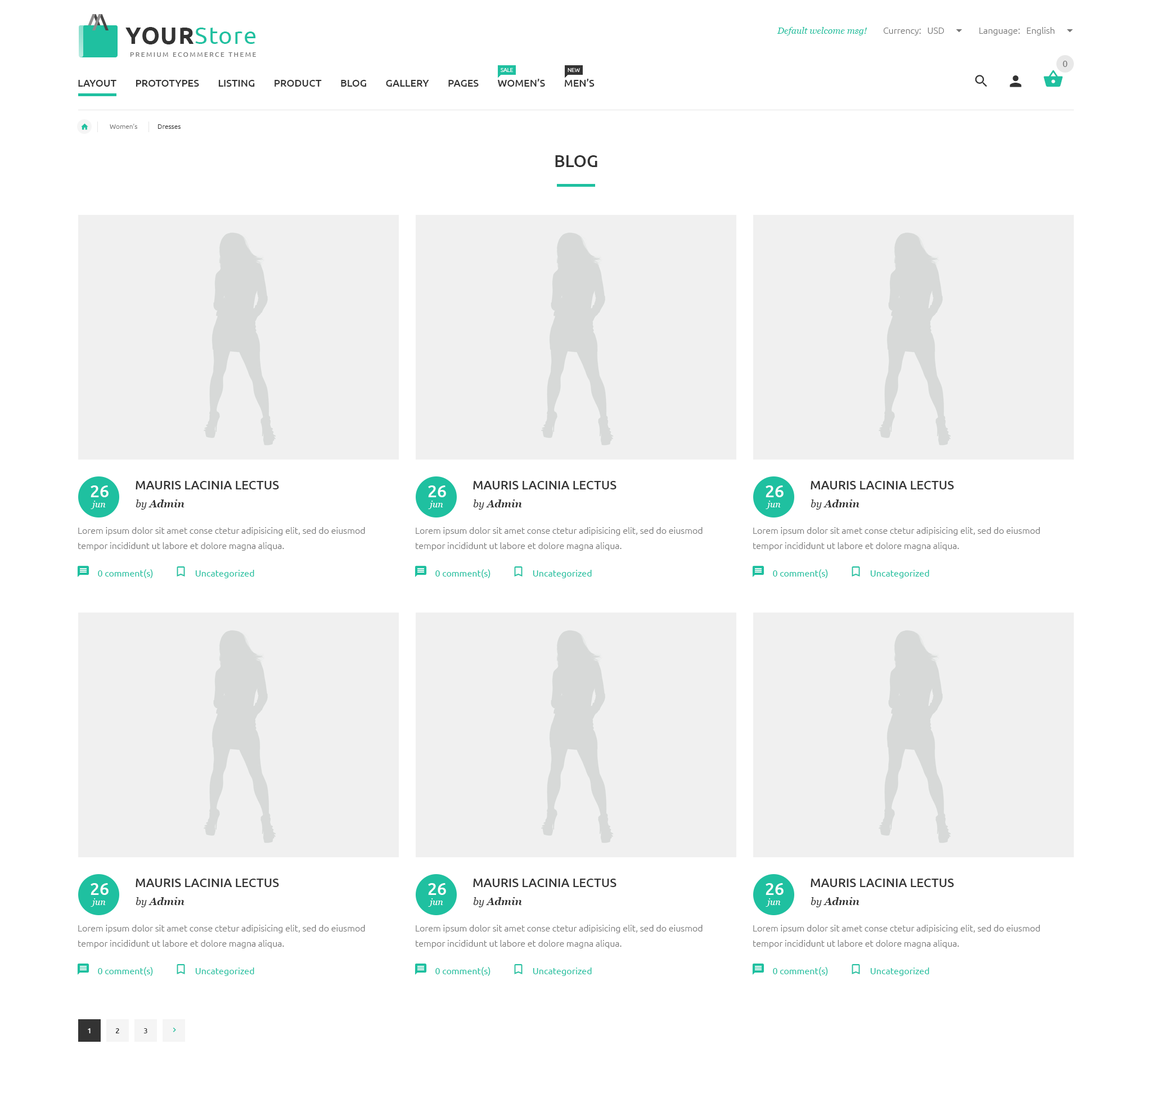
<style>
.page{position:relative;width:1152px;height:1107px;background:#ffffff}
.page>*{position:absolute;margin:0}
.t1{font:23.6px "Ubuntu";letter-spacing:0.04em;color:#1fc0a0}
.t2{font:23.6px "Ubuntu-Bold";letter-spacing:0.04em;color:#333333;text-transform:uppercase}
.t3{font:9px "Georgia-Italic";color:#1fc0a0}
.t4{font:9px "Ubuntu-Light";color:#777777}
.t5{font:6.8px "Ubuntu";letter-spacing:0.2em;color:#777777;text-transform:uppercase}
.t6{font:9px "Ubuntu";color:#777777}
.t7{font:5.6px "Ubuntu-Light";color:#ffffff;text-transform:uppercase}
.t8{font:10.1px "Ubuntu-Medium";color:#333333;text-transform:uppercase}
.t9{font:6.8px "Ubuntu-Light";color:#777777}
.t10{font:6.8px "Ubuntu-Light";color:#333333}
.t11{font:16.9px "Ubuntu-Medium";color:#333333;text-transform:uppercase}
.t12{font:16.9px "Ubuntu-Medium";color:#ffffff;text-transform:uppercase}
.t13{font:12.4px "Ubuntu-Medium";color:#333333;text-transform:uppercase}
.t14{font:9px "Georgia-Italic";color:#ffffff}
.t15{font:10.1px "Georgia-BoldItalic";color:#333333}
.t16{font:10.1px "Georgia-Italic";color:#333333}
.t17{font:9px/15.2px "Ubuntu-Light";color:#777777}
.t18{font:7.3px "Ubuntu-Medium";color:#ffffff;text-transform:uppercase}
.t19{font:7.3px "Ubuntu-Medium";color:#333333;text-transform:uppercase}
</style>
<div class="page">
<p class="t1" style="left:125px;top:27px;width:131px;height:17px"><span class="t2">Your</span>Store</p>
<p class="t3" style="left:777px;top:27px;width:90px;height:8px">Default welcome msg!</p>
<p class="t4" style="left:883px;top:28px;width:61px;height:7px">Currency:   USD</p>
<p class="t4" style="left:979px;top:27px;width:76px;height:8px">Language:   English</p>
<p class="t5" style="left:130px;top:52px;width:126px;height:5px">Premium ecommerce theme</p>
<p class="t6" style="left:1063px;top:61px;width:5px;height:6px">0</p>
<p class="t7" style="left:501px;top:68px;width:12px;height:4px">sale</p>
<p class="t7" style="left:568px;top:68px;width:12px;height:4px">New</p>
<p class="t8" style="left:78px;top:79px;width:517px;height:8px">LAYOUT        Prototypes        LISTING        PRODUCT        BLOG        GALLERY        PAGES        WOMEN’s        MEN’s</p>
<p class="t9" style="left:110px;top:124px;width:27px;height:5px">Women’s</p>
<p class="t10" style="left:158px;top:124px;width:23px;height:5px">Dresses</p>
<p class="t11" style="left:555px;top:155px;width:42px;height:12px">Blog</p>
<p class="t12" style="left:91px;top:485px;width:18px;height:12px">26</p>
<p class="t13" style="left:136px;top:481px;width:143px;height:8px">Mauris lacinia lectus</p>
<p class="t12" style="left:428px;top:485px;width:18px;height:12px">26</p>
<p class="t13" style="left:473px;top:481px;width:143px;height:8px">Mauris lacinia lectus</p>
<p class="t12" style="left:766px;top:485px;width:18px;height:12px">26</p>
<p class="t13" style="left:811px;top:481px;width:143px;height:8px">Mauris lacinia lectus</p>
<p class="t14" style="left:91px;top:501px;width:15px;height:8px">jun</p>
<p class="t15" style="left:136px;top:500px;width:48px;height:10px"><span class="t16">by </span>Admin</p>
<p class="t14" style="left:428px;top:501px;width:15px;height:8px">jun</p>
<p class="t15" style="left:473px;top:500px;width:49px;height:10px"><span class="t16">by </span>Admin</p>
<p class="t14" style="left:766px;top:501px;width:15px;height:8px">jun</p>
<p class="t15" style="left:811px;top:500px;width:49px;height:10px"><span class="t16">by </span>Admin</p>
<p class="t17" style="left:78px;top:527px;width:287px;height:24px">Lorem ipsum dolor sit amet conse ctetur adipisicing elit, sed do eiusmod tempor incididunt ut labore et dolore magna aliqua.</p>
<p class="t17" style="left:416px;top:527px;width:287px;height:24px">Lorem ipsum dolor sit amet conse ctetur adipisicing elit, sed do eiusmod tempor incididunt ut labore et dolore magna aliqua.</p>
<p class="t17" style="left:753px;top:527px;width:287px;height:24px">Lorem ipsum dolor sit amet conse ctetur adipisicing elit, sed do eiusmod tempor incididunt ut labore et dolore magna aliqua.</p>
<p class="t13" style="left:136px;top:879px;width:143px;height:8px">Mauris lacinia lectus</p>
<p class="t13" style="left:473px;top:879px;width:143px;height:8px">Mauris lacinia lectus</p>
<p class="t13" style="left:811px;top:879px;width:143px;height:8px">Mauris lacinia lectus</p>
<p class="t12" style="left:91px;top:883px;width:18px;height:12px">26</p>
<p class="t12" style="left:428px;top:883px;width:18px;height:12px">26</p>
<p class="t12" style="left:766px;top:883px;width:18px;height:12px">26</p>
<p class="t14" style="left:91px;top:898px;width:15px;height:9px">jun</p>
<p class="t15" style="left:136px;top:897px;width:48px;height:10px"><span class="t16">by </span>Admin</p>
<p class="t14" style="left:428px;top:898px;width:15px;height:9px">jun</p>
<p class="t15" style="left:473px;top:897px;width:49px;height:10px"><span class="t16">by </span>Admin</p>
<p class="t14" style="left:766px;top:898px;width:15px;height:9px">jun</p>
<p class="t15" style="left:811px;top:897px;width:49px;height:10px"><span class="t16">by </span>Admin</p>
<p class="t17" style="left:78px;top:925px;width:287px;height:23px">Lorem ipsum dolor sit amet conse ctetur adipisicing elit, sed do eiusmod tempor incididunt ut labore et dolore magna aliqua.</p>
<p class="t17" style="left:416px;top:925px;width:287px;height:23px">Lorem ipsum dolor sit amet conse ctetur adipisicing elit, sed do eiusmod tempor incididunt ut labore et dolore magna aliqua.</p>
<p class="t17" style="left:753px;top:925px;width:287px;height:23px">Lorem ipsum dolor sit amet conse ctetur adipisicing elit, sed do eiusmod tempor incididunt ut labore et dolore magna aliqua.</p>
<p class="t18" style="left:88px;top:1028px;width:3px;height:5px">1</p>
<p class="t19" style="left:115px;top:1028px;width:4px;height:5px">2</p>
<p class="t19" style="left:143px;top:1028px;width:4px;height:5px">3</p>
</div>
